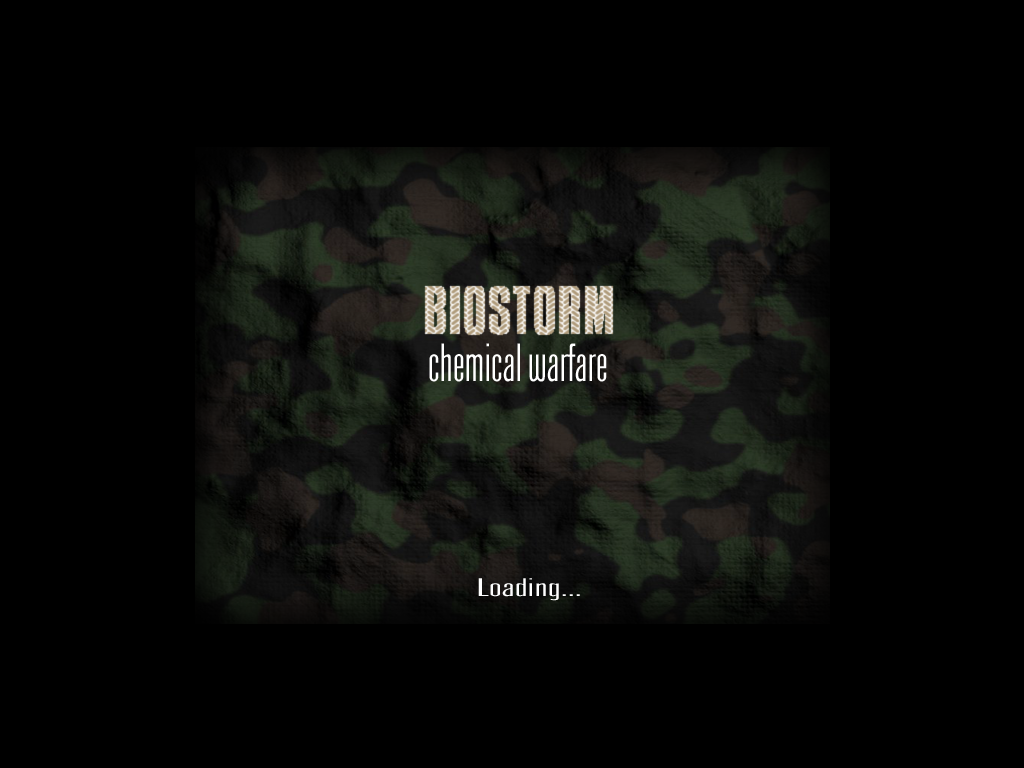
<style>
.page{position:relative;width:1024px;height:768px;background:#000000}
.page>*{position:absolute;margin:0}
.t1{font:47.8px "Arizona";color:#ffffff}
.t2{font:22.6px "Arizona";color:#ffffff;scale:2.16 1}
</style>
<div class="page">
<p class="t1" style="left:429px;top:343px;width:178px;height:39px">chemical warfare</p>
<p class="t2" style="left:478px;top:578px;width:102px;height:23px">Loading...</p>
</div>
